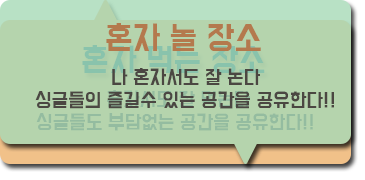
<style>
.page{position:relative;width:365px;height:180px;background:#b5d4ad}
.page>*{position:absolute;margin:0}
.t1{font:29.1px "BMDoHyeon";color:#b4794d}
.t2{font:29.1px "BMDoHyeon";color:#89c3ac}
.t3{font:17.5px/22.6px "BMDoHyeon";color:#4b4742}
</style>
<div class="page">
<p class="t1" style="left:106px;top:23px;width:155px;height:28px">혼자 놀 장소</p>
<p class="t2" style="left:82px;top:45px;width:183px;height:28px">혼자 먹는 장소</p>
<p class="t3" style="left:35px;top:68px;width:299px;height:41px;text-align:center">나 혼자서도 잘 논다<br>싱글들의 즐길수 있는 공간을 공유한다!!</p>
</div>
